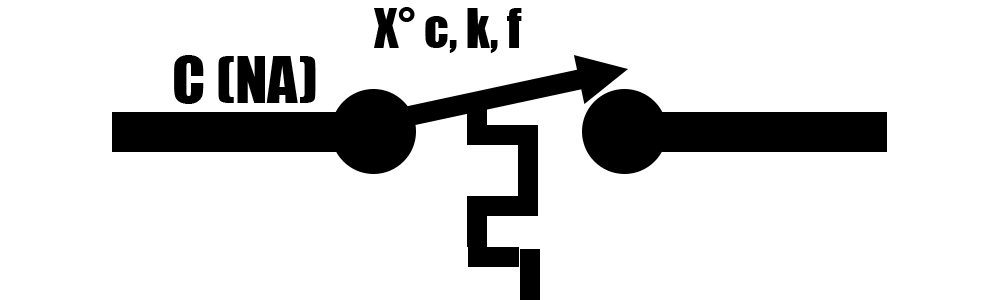
<style>
.page{position:relative;width:1000px;height:300px;background:#ffffff}
.page>*{position:absolute;margin:0}
.t1{font:50px "Impact";color:#000000}
.t2{font:60px "Impact";color:#000000}
</style>
<div class="page">
<p class="t1" style="left:374px;top:7px;width:148px;height:46px">X° c, k, f</p>
<p class="t2" style="left:174px;top:55px;width:142px;height:49px">C (NA)</p>
</div>
